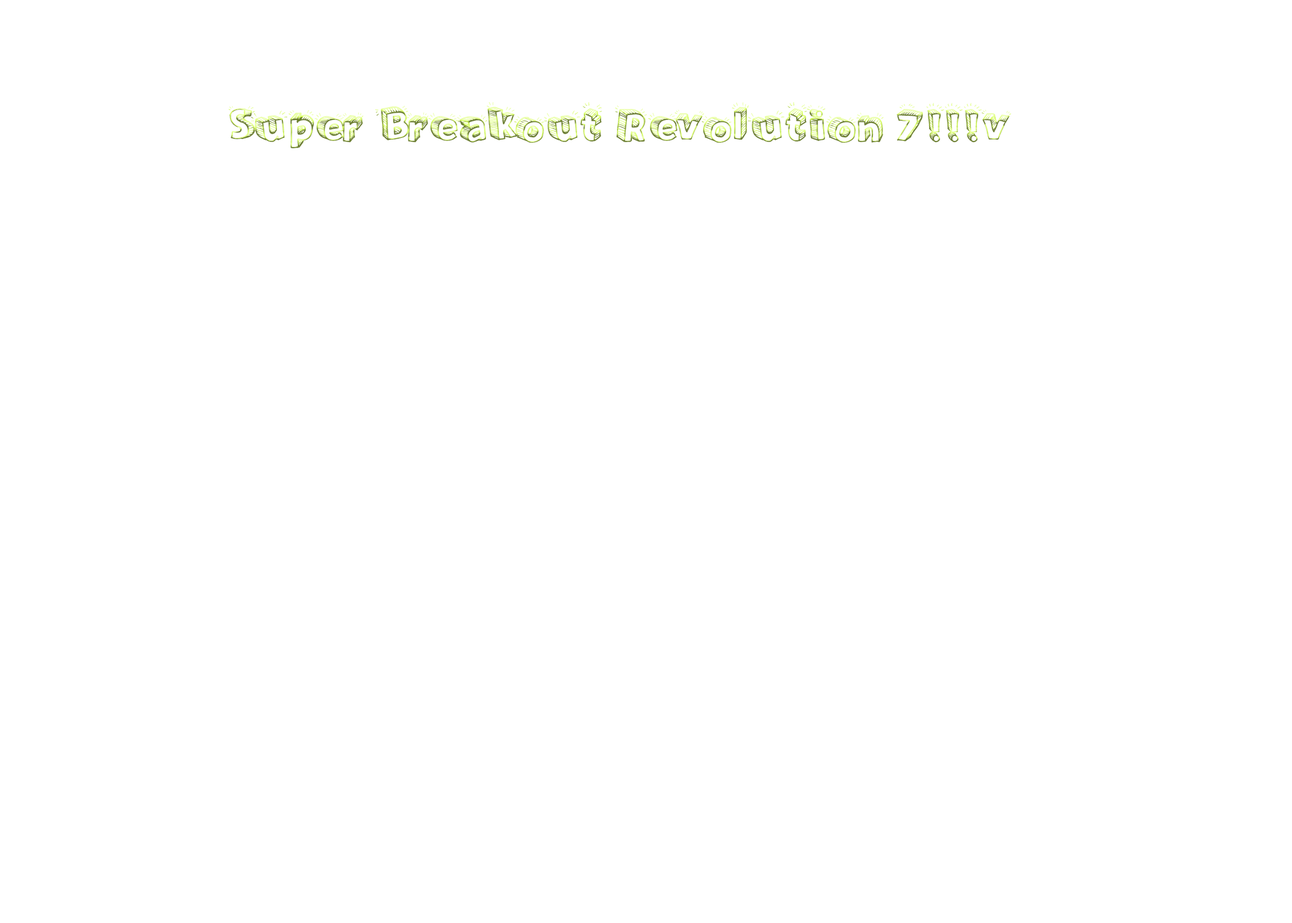
<style>
.page{position:relative;width:1292px;height:923px;background:#ffffff}
.page>*{position:absolute;margin:0}
.t1{font:46.1px "Sketch3D"}
</style>
<div class="page">
<p class="t1" style="left:228px;top:102px;width:783px;height:46px">Super Breakout Revolution 7!!!v</p>
</div>
